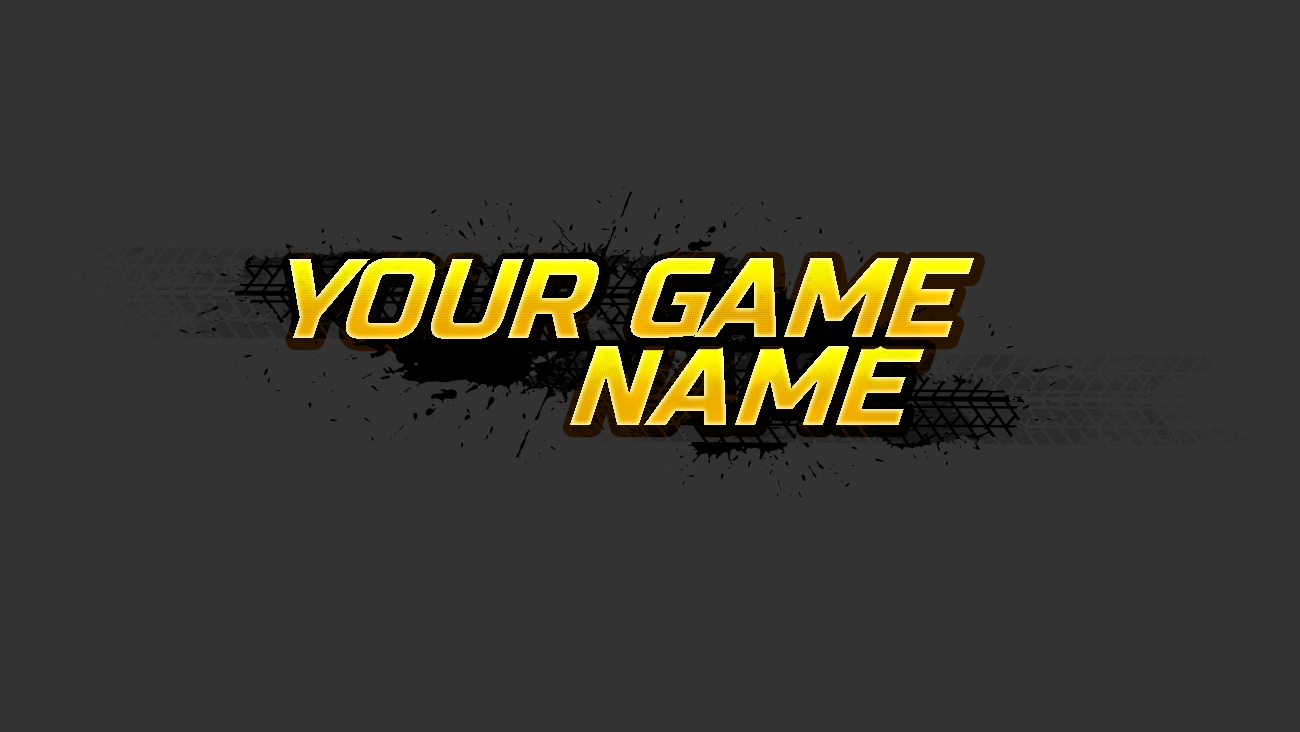
<style>
.page{position:relative;width:1300px;height:732px;background:#333333}
.page>*{position:absolute;margin:0}
.t1{font:119.5px "RussoOne-Regular";scale:0.95 1}
</style>
<div class="page">
<p class="t1" style="left:289px;top:258px;width:310px;height:81px">YOUR</p>
<p class="t1" style="left:630px;top:258px;width:344px;height:80px">GAME</p>
<p class="t1" style="left:570px;top:346px;width:355px;height:79px">NAME</p>
</div>
